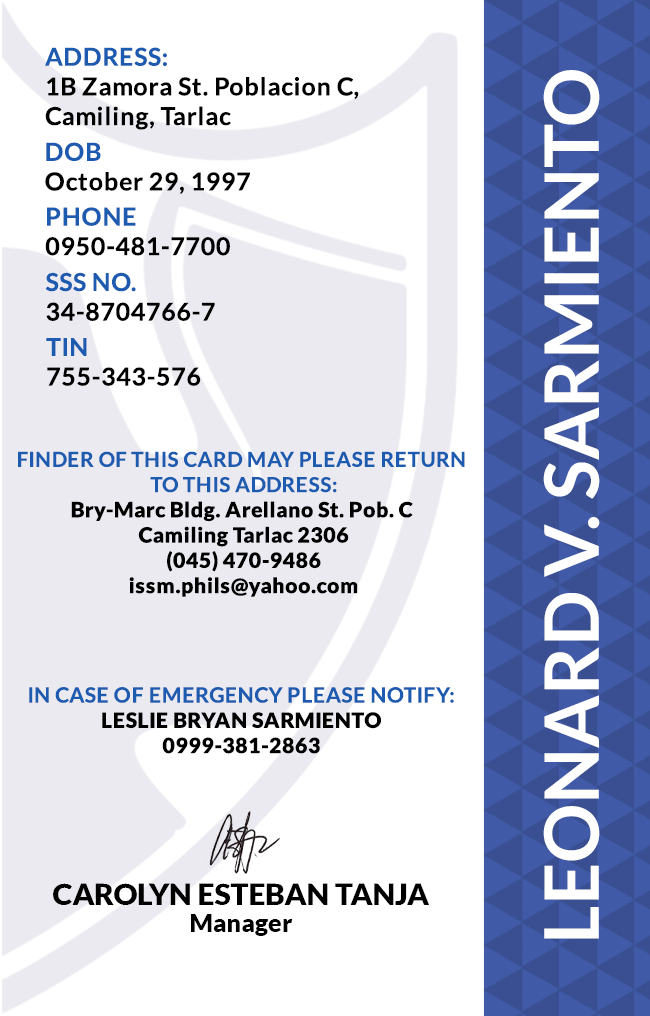
<style>
.page{position:relative;width:650px;height:1016px;background:#ffffff}
.page>*{position:absolute;margin:0}
.t1{font:24.7px/29.6px "Lato-Bold";letter-spacing:0.025em;color:#000000}
.t2{font:24.7px/29.6px "Lato-Bold";letter-spacing:0.025em;color:#1c5bb0}
.t3{font:75px "Lato-Bold";color:#ffffff}
.t4{font:24.7px/29.6px "Lato-Bold";letter-spacing:0.025em}
.t5{font:21.1px "Lato-Black";letter-spacing:0.025em}
.t6{font:20.5px/25.3px "Lato-Bold";letter-spacing:0.025em;text-transform:uppercase}
.t7{font:21.1px/25.3px "Lato-Bold";letter-spacing:0.025em}
.t8{font:29.5px "Lato-Black";color:#000000}
.t9{font:25px "Lato-Black";color:#000000}
</style>
<div class="page">
<p class="t1" style="left:45px;top:47px;width:314px;height:83px"><span class="t2">ADDRESS:<br></span>1B Zamora St. Poblacion C, <br>Camiling, Tarlac</p>
<p class="t3" style="left:543px;top:70px;width:57px;height:869px;rotate:-90deg">LEONARD V. SARMIENTO</p>
<p class="t1" style="left:45px;top:142px;width:205px;height:52px">DOB<br>October 29, 1997</p>
<p class="t4" style="left:45px;top:207px;width:185px;height:49px">PHONE <br>0950-481-7700</p>
<p class="t4" style="left:45px;top:272px;width:170px;height:49px">SSS NO.<br>34-8704766-7</p>
<p class="t1" style="left:46px;top:338px;width:155px;height:48px">TIN<br>755-343-576</p>
<p class="t5" style="left:18px;top:451px;width:447px;height:146px;text-align:center"><span class="t6">Finder of this card may please return <br>to this address:<br></span>Bry-Marc Bldg. Arellano St. Pob. C <br>Camiling Tarlac 2306<br>(045) 470-9486<br>issm.phils@yahoo.com</p>
<p class="t5" style="left:29px;top:687px;width:425px;height:67px;text-align:center"><span class="t7">IN CASE OF EMERGENCY PLEASE NOTIFY:<br></span>LESLIE BRYAN SARMIENTO<br>0999-381-2863</p>
<p class="t8" style="left:53px;top:883px;width:376px;height:22px">CAROLYN ESTEBAN TANJA</p>
<p class="t9" style="left:191px;top:914px;width:102px;height:22px">Manager</p>
</div>
